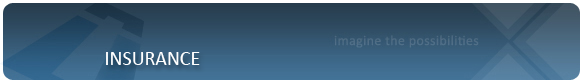
<style>
.page{position:relative;width:580px;height:80px}
.page>*{position:absolute;margin:0}
.t1{font:20px "Calibri";color:#ffffff}
</style>
<div class="page">
<p class="t1" style="left:106px;top:52px;width:94px;height:13px">INSURANCE</p>
</div>
